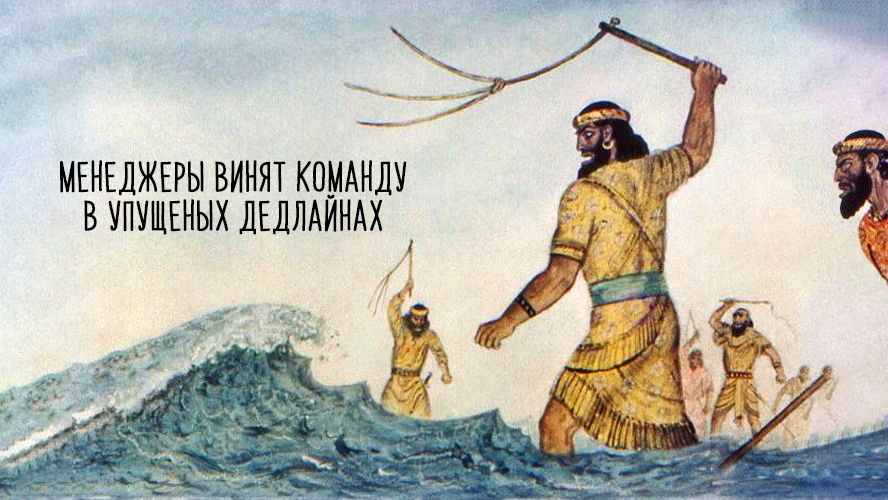
<style>
.page{position:relative;width:888px;height:500px}
.page>*{position:absolute;margin:0}
.t1{font:25.8px/38.7px "PapayaSunrise";color:#000000;font-weight:bold}
</style>
<div class="page">
<p class="t1" style="left:60px;top:160px;width:347px;height:75px;text-align:center">Менеджеры винят команду<br>в упущеных дедлайнах</p>
</div>
